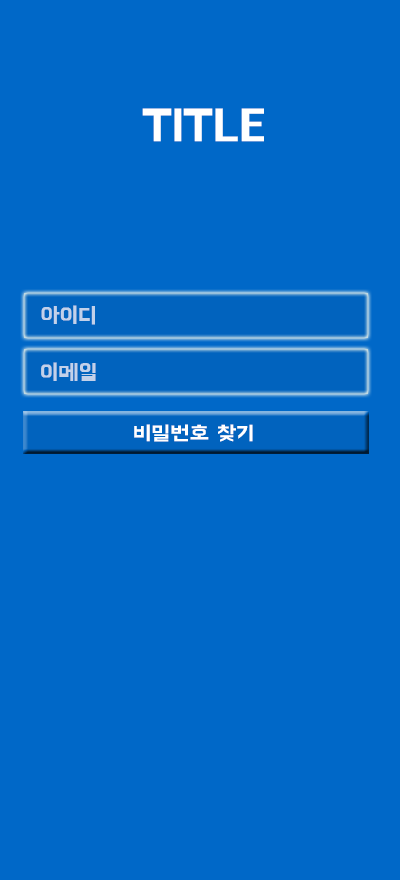
<style>
.page{position:relative;width:400px;height:880px;background:#0068c8}
.page>*{position:absolute;margin:0}
.t1{font:45px "BMHANNAPro";color:#ffffff}
.t2{font:22.1px "BMHANNA11yrsold";color:#c2d1ea;scale:1.04 1}
.t3{font:19.8px "BMHANNAPro";color:#ffffff;scale:1.16 1}
</style>
<div class="page">
<p class="t1" style="left:142px;top:108px;width:122px;height:34px">TITLE</p>
<p class="t2" style="left:41px;top:305px;width:54px;height:20px">아이디</p>
<p class="t2" style="left:41px;top:362px;width:55px;height:19px">이메일</p>
<p class="t3" style="left:134px;top:424px;width:119px;height:18px">비밀번호 찾기</p>
</div>
